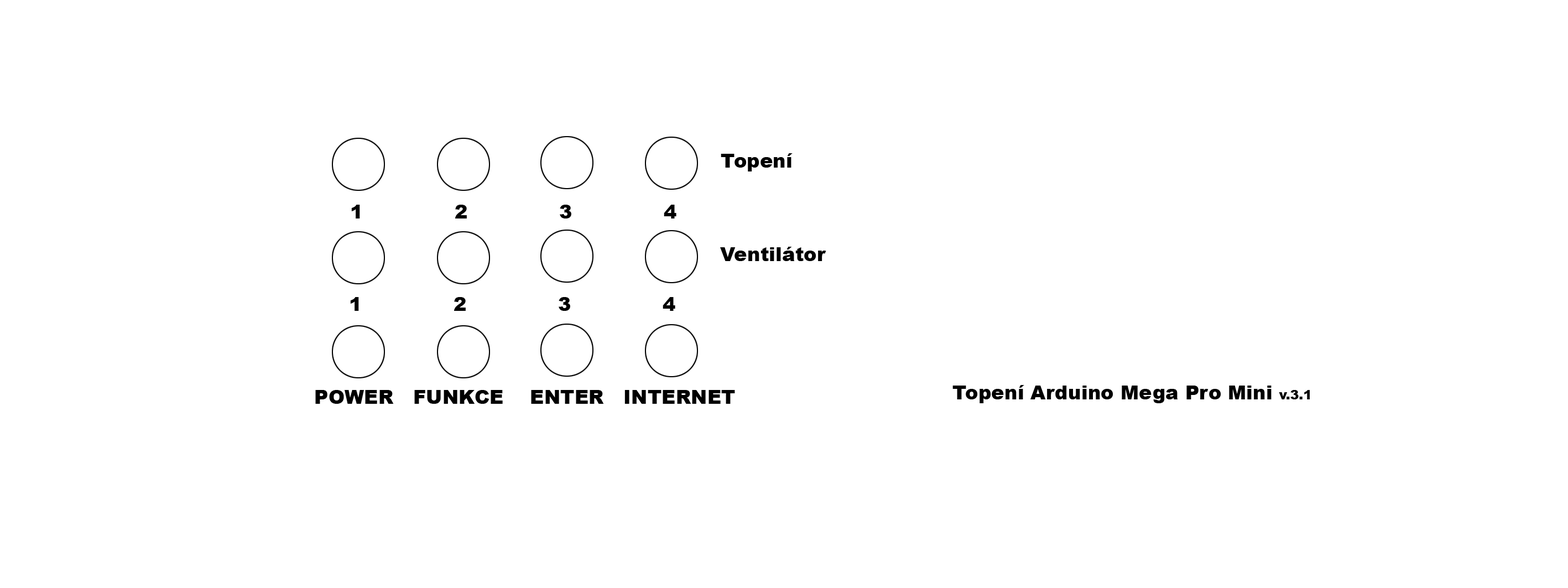
<style>
.page{position:relative;width:1568px;height:588px;background:#ffffff}
.page>*{position:absolute;margin:0}
.t1{font:19.6px "Arial-Black";color:#000000}
.t2{font:13.1px "Arial-Black";color:#000000}
</style>
<div class="page">
<p class="t1" style="left:721px;top:153px;width:72px;height:18px">Topení</p>
<p class="t1" style="left:351px;top:205px;width:325px;height:13px">1              2              3              4</p>
<p class="t1" style="left:720px;top:247px;width:106px;height:14px">Ventilátor</p>
<p class="t1" style="left:350px;top:297px;width:325px;height:14px">1              2              3              4</p>
<p class="t1" style="left:315px;top:390px;width:420px;height:14px">POWER   FUNKCE    ENTER   INTERNET</p>
<p class="t1" style="left:952px;top:385px;width:358px;height:18px">Topení Arduino Mega Pro Mini <span class="t2">v.3.1</span></p>
</div>
